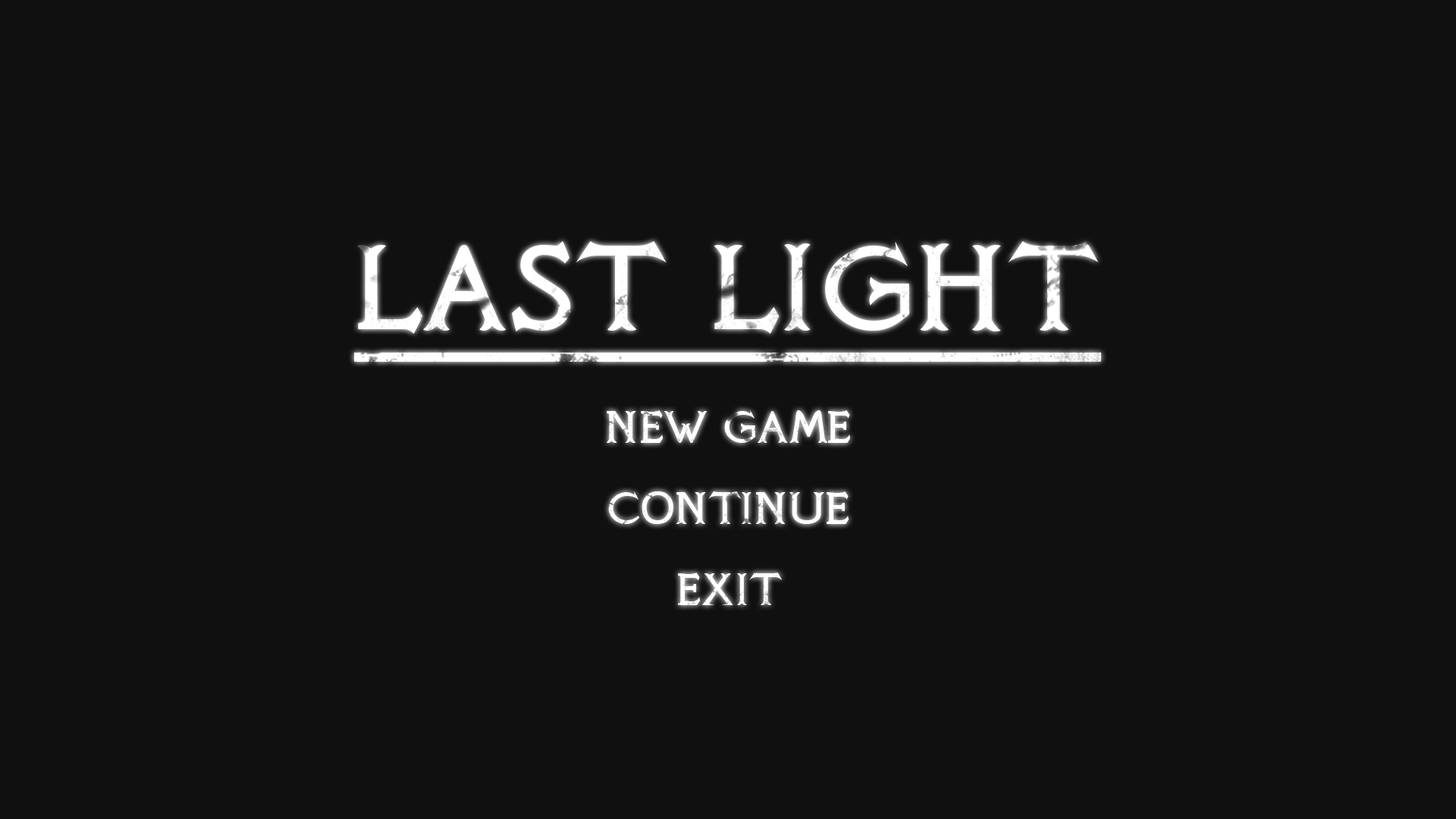
<style>
.page{position:relative;width:1456px;height:819px;background:#101010}
.page>*{position:absolute;margin:0}
.t1{font:151.3px "KnightsQuest";letter-spacing:0.025em;color:#ffffff;text-transform:uppercase}
.t2{font:55.1px "KnightsQuest";letter-spacing:0.025em;color:#ffffff;text-transform:uppercase}
</style>
<div class="page">
<p class="t1" style="left:357px;top:241px;width:742px;height:93px">Last light</p>
<p class="t2" style="left:606px;top:410px;width:245px;height:33px">NEW GAME</p>
<p class="t2" style="left:608px;top:491px;width:241px;height:33px">CONTINUE</p>
<p class="t2" style="left:678px;top:573px;width:105px;height:32px">EXIT</p>
</div>
